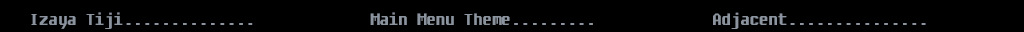
<style>
.page{position:relative;width:1024px;height:32px;background:#000000}
.page>*{position:absolute;margin:0}
.t1{font:18.9px "ascsys";letter-spacing:-0.055em;color:#8b949e}
</style>
<div class="page">
<p class="t1" style="left:31px;top:12px;width:222px;height:17px">Izaya Tiji..............</p>
<p class="t1" style="left:370px;top:12px;width:223px;height:13px">Main Menu Theme.........</p>
<p class="t1" style="left:713px;top:12px;width:213px;height:17px">Adjacent...............</p>
</div>
